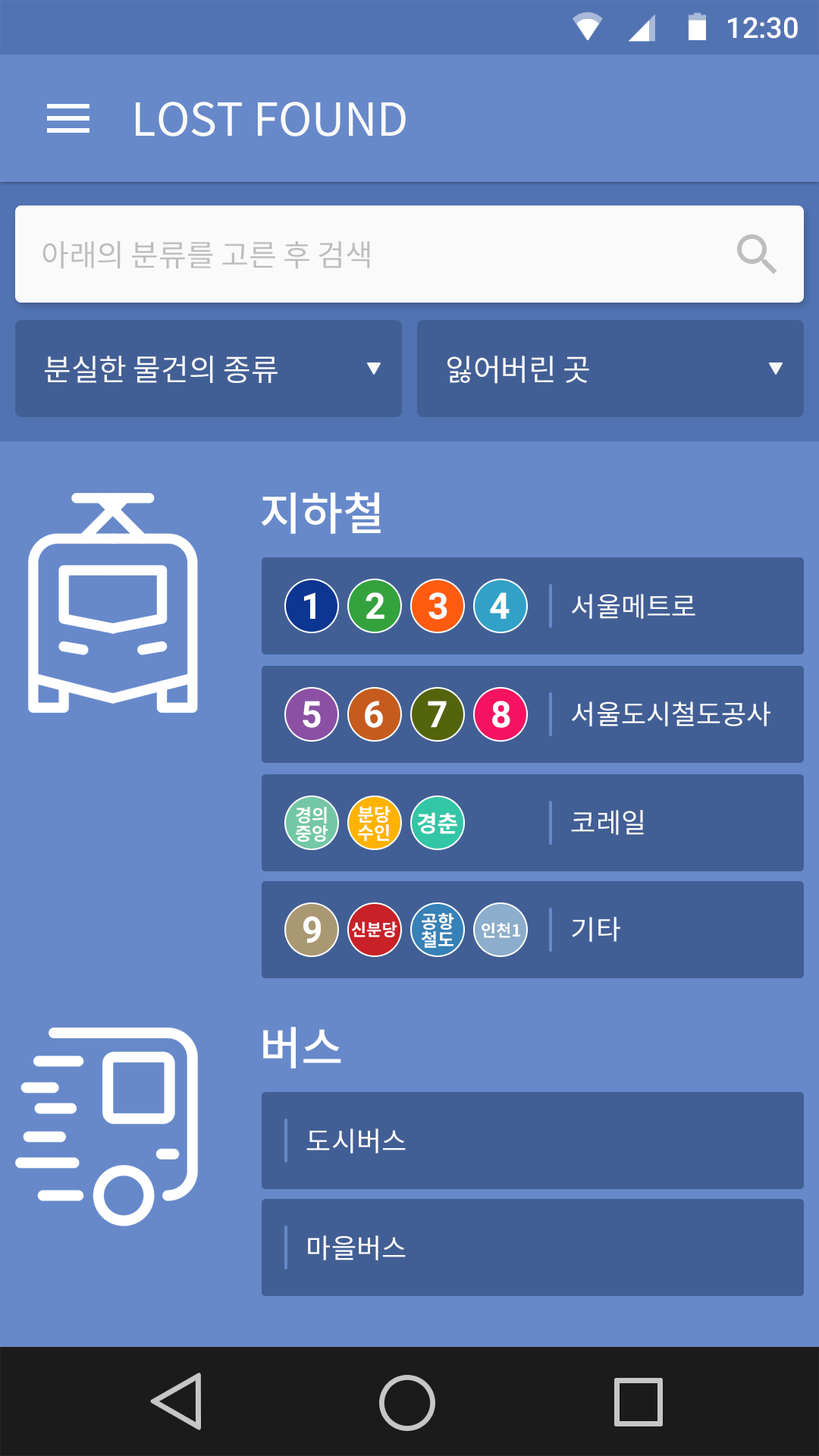
<style>
.page{position:relative;width:819px;height:1456px;background:#6789ca}
.page>*{position:absolute;margin:0}
.t1{font:28.8px "Roboto-Medium";color:#ffffff}
.t2{font:45.5px "NotoSansCJKkr-Regular";letter-spacing:-0.005em;color:#fafafa}
.t3{font:30.3px "NotoSansCJKkr-Regular";letter-spacing:-0.005em;color:#bdbdbd}
.t4{font:30.3px "NotoSansCJKkr-Regular";letter-spacing:-0.005em;color:#fafafa}
.t5{font:45.5px "NotoSansCJKkr-Medium";color:#ffffff}
.t6{font:36.4px "Roboto-Bold";color:#ffffff}
.t7{font:27.3px "NotoSansCJKkr-Regular";color:#ffffff}
.t8{font:18.2px/18.2px "NotoSansCJKkr-Bold";color:#ffffff}
.t9{font:22.7px "NotoSansCJKkr-Bold";color:#ffffff}
.t10{font:16.7px "NotoSansCJKkr-Bold";color:#ffffff}
</style>
<div class="page">
<p class="t1" style="left:728px;top:17px;width:70px;height:22px">12:30</p>
<p class="t2" style="left:136px;top:102px;width:270px;height:34px">LOST FOUND</p>
<p class="t3" style="left:42px;top:241px;width:328px;height:27px">아래의 분류를 고른 후 검색</p>
<p class="t4" style="left:45px;top:356px;width:233px;height:27px">분실한 물건의 종류</p>
<p class="t4" style="left:447px;top:356px;width:142px;height:28px">잃어버린 곳</p>
<p class="t5" style="left:261px;top:492px;width:120px;height:42px">지하철</p>
<p class="t6" style="left:304px;top:592px;width:11px;height:27px">1</p>
<p class="t6" style="left:366px;top:592px;width:18px;height:27px">2</p>
<p class="t6" style="left:428px;top:592px;width:19px;height:28px">3</p>
<p class="t6" style="left:490px;top:592px;width:20px;height:27px">4</p>
<p class="t7" style="left:572px;top:594px;width:123px;height:25px">서울메트로</p>
<p class="t6" style="left:303px;top:701px;width:18px;height:27px">5</p>
<p class="t6" style="left:365px;top:701px;width:18px;height:27px">6</p>
<p class="t6" style="left:428px;top:701px;width:19px;height:26px">7</p>
<p class="t6" style="left:492px;top:701px;width:18px;height:27px">8</p>
<p class="t7" style="left:572px;top:701px;width:198px;height:25px">서울도시철도공사</p>
<p class="t8" style="left:296px;top:807px;width:32px;height:35px;text-align:center">경의<br>중앙</p>
<p class="t8" style="left:358px;top:806px;width:33px;height:35px;text-align:center">분당<br>수인</p>
<p class="t7" style="left:571px;top:810px;width:73px;height:25px">코레일</p>
<p class="t9" style="left:417px;top:812px;width:40px;height:22px">경춘</p>
<p class="t6" style="left:303px;top:916px;width:18px;height:27px">9</p>
<p class="t8" style="left:421px;top:913px;width:33px;height:35px">공항<br>철도</p>
<p class="t7" style="left:572px;top:917px;width:48px;height:25px">기타</p>
<p class="t10" style="left:352px;top:921px;width:45px;height:16px">신분당</p>
<p class="t10" style="left:482px;top:922px;width:38px;height:16px">인천1</p>
<p class="t5" style="left:263px;top:1027px;width:78px;height:41px">버스</p>
<p class="t7" style="left:306px;top:1128px;width:100px;height:25px">도시버스</p>
<p class="t7" style="left:308px;top:1235px;width:98px;height:25px">마을버스</p>
</div>
